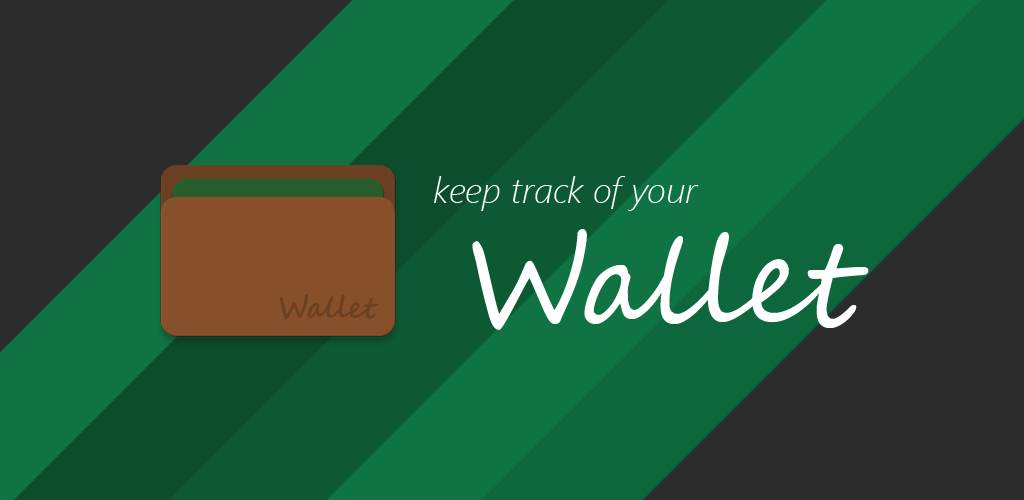
<style>
.page{position:relative;width:1024px;height:500px;background:#2c2c2c}
.page>*{position:absolute;margin:0}
.t1{font:36px "SegoeUI-LightItalic";color:#ffffff}
.t2{font:120px "SegoeScript";color:#ffffff}
</style>
<div class="page">
<p class="t1" style="left:434px;top:176px;width:265px;height:35px">keep track of your</p>
<p class="t2" style="left:472px;top:229px;width:397px;height:101px">Wallet</p>
</div>
